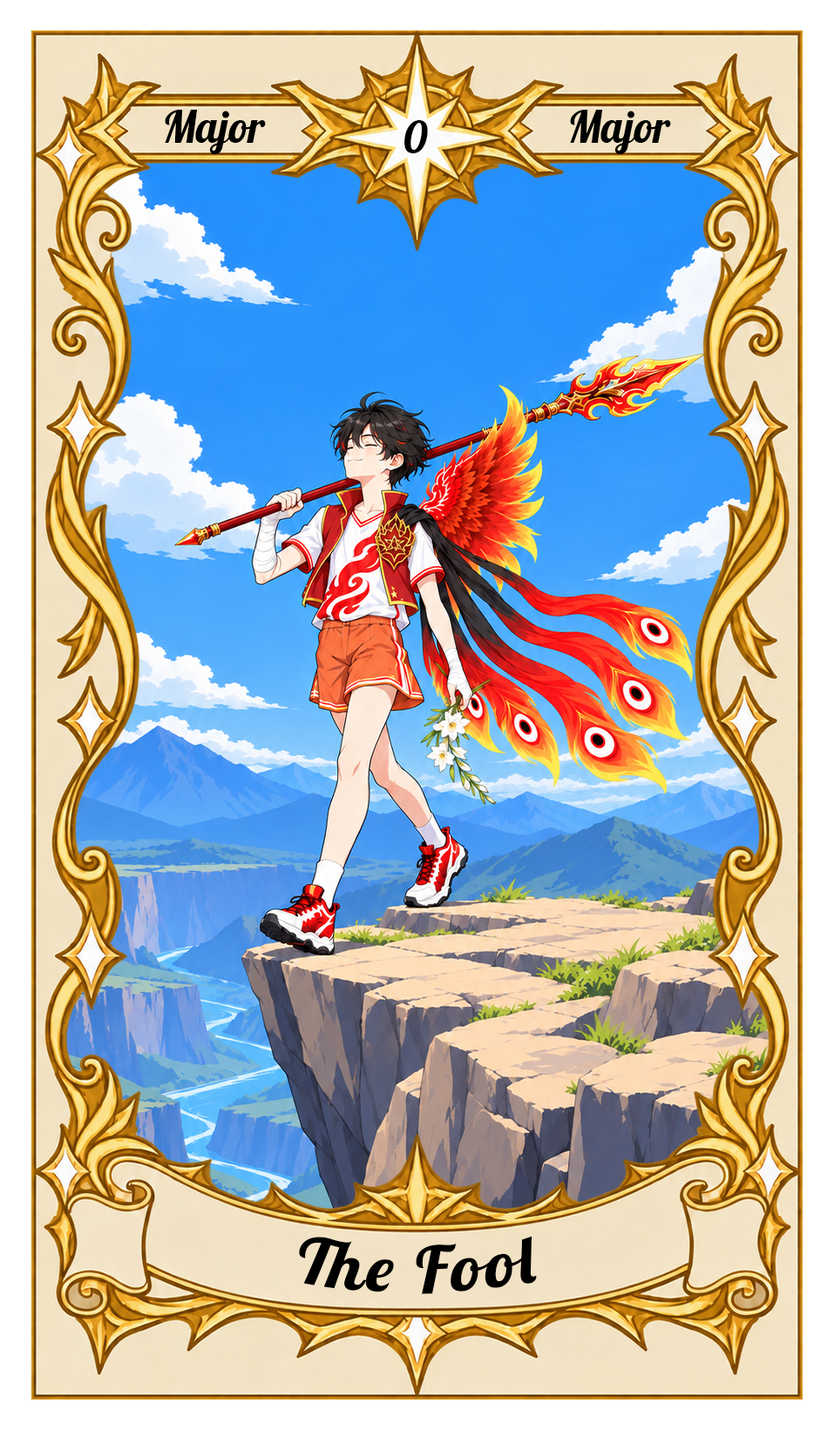
<style>
.page{position:relative;width:834px;height:1430px}
.page>*{position:absolute;margin:0}
.t1{font:43.6px "Lobster-Regular";color:#000000}
.t2{font:65.3px "Lobster-Regular";letter-spacing:0.05em;color:#000000}
</style>
<div class="page">
<p class="t1" style="left:165px;top:110px;width:101px;height:44px">Major</p>
<p class="t1" style="left:570px;top:110px;width:101px;height:44px">Major</p>
<p class="t1" style="left:404px;top:120px;width:24px;height:33px">0</p>
<p class="t2" style="left:299px;top:1236px;width:238px;height:58px">The Fool</p>
</div>
